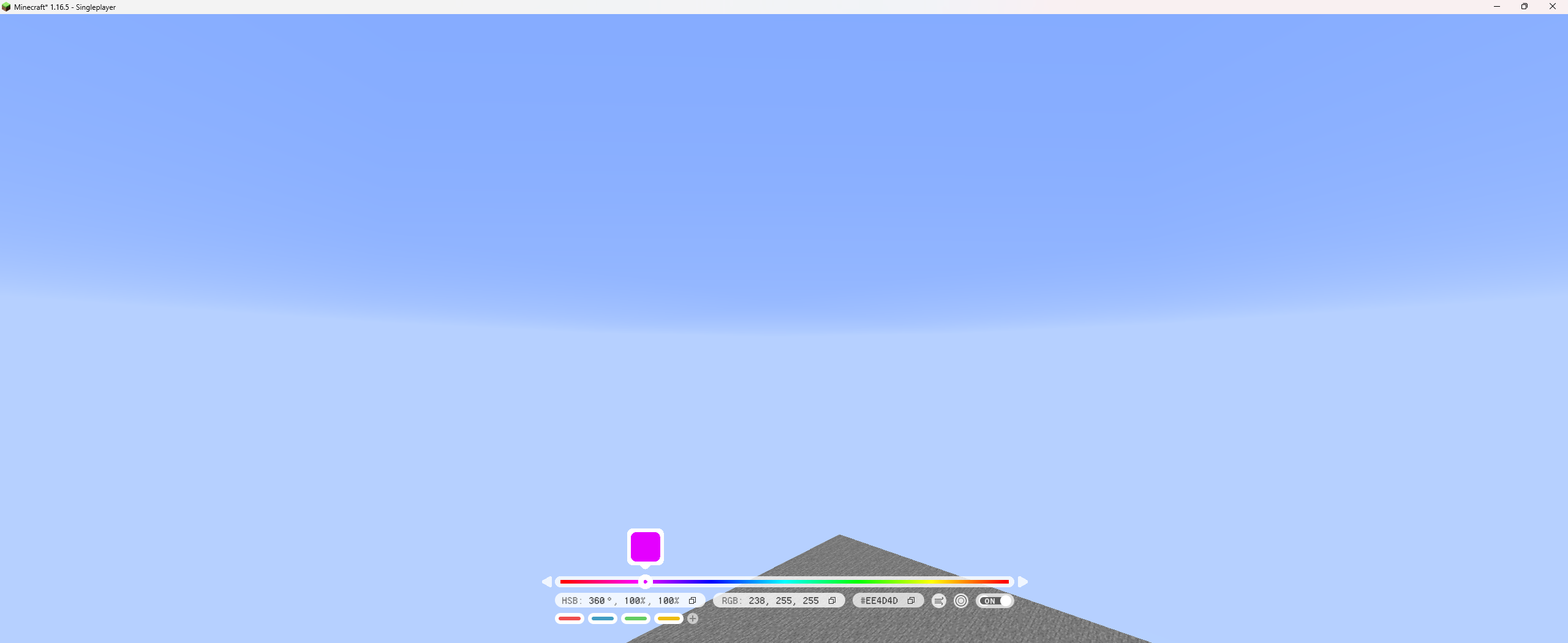
<style>
.page{position:relative;width:1568px;height:643px;background:#b6d0ff}
.page>*{position:absolute;margin:0}
.t1{font:9.8px "Ark-Pixel-12px-monospaced-zh_cn-Regular";letter-spacing:0.05em;color:#727272;text-transform:uppercase}
.t2{font:9.8px "Ark-Pixel-12px-monospaced-zh_cn-Regular";letter-spacing:0.05em;color:#303030;text-transform:uppercase}
.t3{font:9.8px "Ark-Pixel-12px-monospaced-zh_cn-Regular";letter-spacing:0.2em;color:#303030;text-transform:uppercase}
.t4{font:9.8px "Ark-Pixel-12px-monospaced-zh_cn-Regular";letter-spacing:0.2em;color:#727272;text-transform:uppercase}
.t5{font:7.4px "MyriadPro-Bold";letter-spacing:0.05em;color:#e5e5e5;text-transform:uppercase}
</style>
<div class="page">
<p class="t1" style="left:562px;top:597px;width:117px;height:9px">HSB: <span class="t2">36</span><span class="t3">0</span><span class="t4">°</span>,<span class="t2"> 100</span><span class="t4">%</span>,<span class="t2"> 100</span><span class="t4">%</span></p>
<p class="t2" style="left:722px;top:597px;width:97px;height:9px"><span class="t1">RGB: </span>238, 255, 255</p>
<p class="t2" style="left:861px;top:597px;width:37px;height:8px"><span class="t1">#</span>ee4d4d</p>
<p class="t5" style="left:984px;top:598px;width:11px;height:6px">ON</p>
</div>
